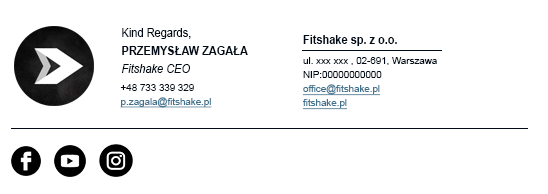
<style>
.page{position:relative;width:548px;height:194px;background:#ffffff}
.page>*{position:absolute;margin:0}
.t1{font:11.8px/18px "Arial-BoldMT";color:#000b17;scale:0.93 1}
.t2{font:11.8px/18px "ArialMT";color:#242424;scale:0.93 1}
.t3{font:11.8px/18px "ArialMT";color:#000b17;scale:0.93 1}
.t4{font:11.8px/18px "Arial-ItalicMT";color:#000b17;scale:0.93 1}
.t5{font:11.8px "Arial-BoldMT";color:#000b17;scale:0.93 1}
.t6{font:10.5px/14px "ArialMT";color:#000b17;scale:0.93 1}
.t7{font:10.5px/14px "ArialMT";color:#3d718d;text-decoration:underline;scale:0.93 1}
.t8{font:10.5px/18px "ArialMT";color:#242424;scale:0.93 1}
</style>
<div class="page">
<p class="t1" style="left:121px;top:28px;width:127px;height:45px"><span class="t2"><br></span><span class="t3">Kind Regards,<br></span>PRZEMYSŁAW ZAGAŁA<br><span class="t4">Fitshake CEO</span></p>
<p class="t5" style="left:303px;top:35px;width:94px;height:11px">Fitshake sp. z o.o.</p>
<p class="t6" style="left:303px;top:57px;width:134px;height:53px">ul. xxx xxx , 02-691, Warszawa<br>NIP:00000000000<br><span class="t7">office@fitshake.pl<br>fitshake.pl</span></p>
<p class="t7" style="left:120px;top:84px;width:92px;height:24px"><span class="t8"><br></span><span class="t6">+48 733 339 329       <br></span>p.zagala@fitshake.pl</p>
</div>
